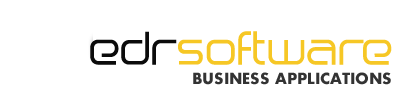
<style>
.page{position:relative;width:400px;height:100px;background:#ffffff}
.page>*{position:absolute;margin:0}
.t1{font:42px "Birdman";color:#f6c725}
.t2{font:42px "Birdman";color:#0b0b0b}
.t3{font:16.7px "Aharoni-Bold";color:#333333;text-transform:uppercase}
</style>
<div class="page">
<p class="t1" style="left:90px;top:31px;width:302px;height:34px"><span class="t2">edr</span>software</p>
<p class="t3" style="left:193px;top:72px;width:198px;height:13px">business applications</p>
</div>
